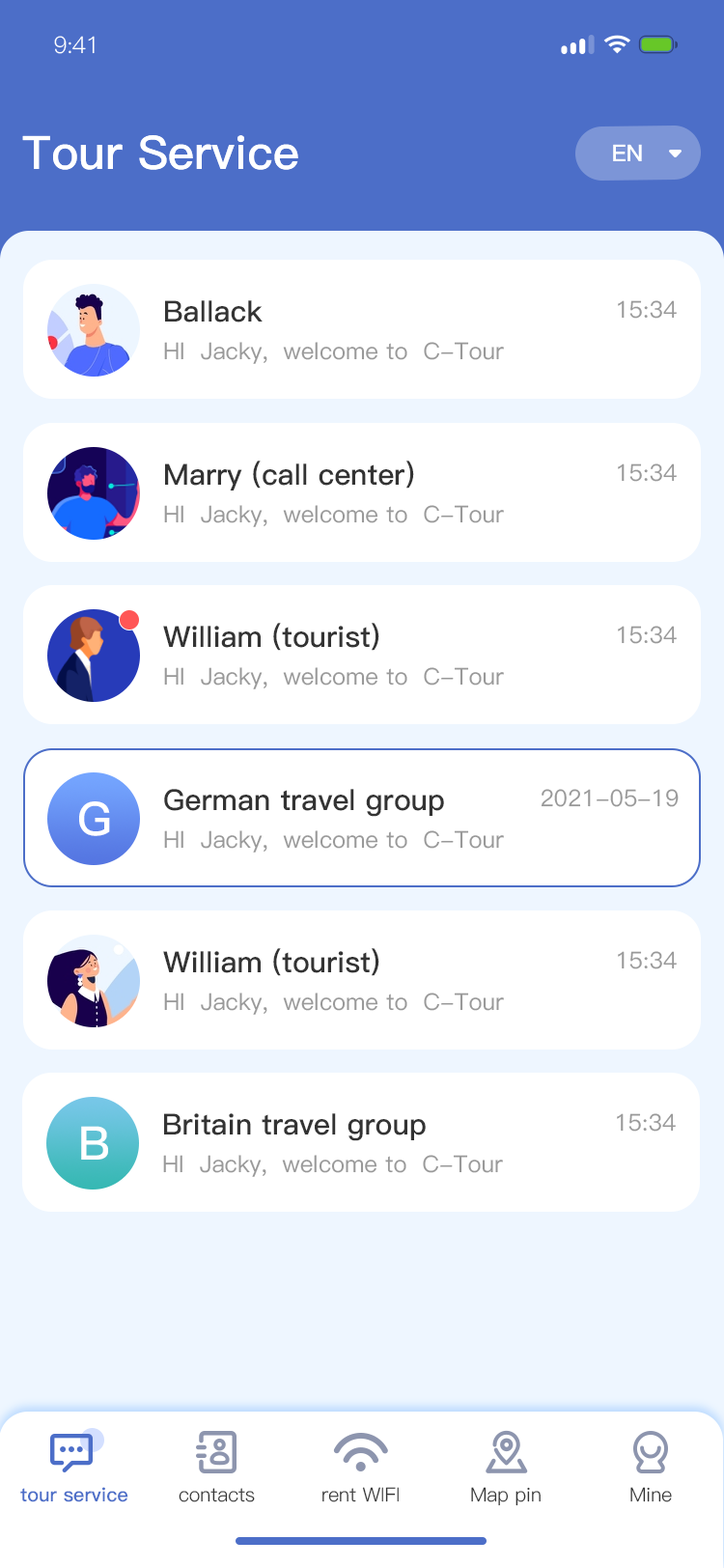
<style>
.page{position:relative;width:724px;height:1568px;background:#ffffff}
.page>*{position:absolute;margin:0}
.t1{font:23.2px "PingFang-SC-Regular";letter-spacing:-0.025em;color:#ffffff}
.t2{font:46.3px "PingFang-SC-Bold";color:#ffffff}
.t3{font:46.3px "PingFang-SC-Bold";color:#ffffff;text-transform:uppercase}
.t4{font:23.2px "PingFang-SC-Bold";color:#ffffff}
.t5{font:29px "PingFang-SC-Bold";color:#333333}
.t6{font:23.2px "PingFang-SC-Medium";color:#999999}
.t7{font:19.3px "PingFang-SC-Bold";color:#4c6ec8}
.t8{font:19.3px "PingFang-SC-Regular";color:#333333}
</style>
<div class="page">
<p class="t1" style="left:54px;top:36px;width:41px;height:18px">9:41</p>
<p class="t2" style="left:22px;top:135px;width:276px;height:35px"><span class="t3">t</span>our<span class="t3"> s</span>ervice</p>
<p class="t4" style="left:613px;top:144px;width:29px;height:17px">EN</p>
<p class="t5" style="left:165px;top:300px;width:98px;height:22px">Ballack</p>
<p class="t6" style="left:618px;top:300px;width:59px;height:19px">15:34</p>
<p class="t6" style="left:164px;top:342px;width:340px;height:22px">HI  Jacky,  welcome to  C-Tour</p>
<p class="t5" style="left:165px;top:461px;width:249px;height:29px">Marry (call center)</p>
<p class="t6" style="left:618px;top:463px;width:59px;height:19px">15:34</p>
<p class="t6" style="left:164px;top:505px;width:340px;height:22px">HI  Jacky,  welcome to  C-Tour</p>
<p class="t5" style="left:163px;top:623px;width:216px;height:28px">William (tourist)</p>
<p class="t6" style="left:618px;top:626px;width:59px;height:18px">15:34</p>
<p class="t6" style="left:164px;top:667px;width:340px;height:22px">HI  Jacky,  welcome to  C-Tour</p>
<p class="t5" style="left:164px;top:789px;width:280px;height:28px">German travel group</p>
<p class="t6" style="left:541px;top:789px;width:138px;height:18px">2021-05-19</p>
<p class="t2" style="left:79px;top:801px;width:31px;height:35px">G</p>
<p class="t6" style="left:164px;top:830px;width:340px;height:23px">HI  Jacky,  welcome to  C-Tour</p>
<p class="t5" style="left:163px;top:948px;width:216px;height:28px">William (tourist)</p>
<p class="t6" style="left:618px;top:951px;width:59px;height:18px">15:34</p>
<p class="t6" style="left:164px;top:993px;width:340px;height:22px">HI  Jacky,  welcome to  C-Tour</p>
<p class="t5" style="left:164px;top:1113px;width:262px;height:28px">Britain travel group</p>
<p class="t6" style="left:617px;top:1113px;width:59px;height:19px">15:34</p>
<p class="t2" style="left:81px;top:1126px;width:27px;height:34px">B</p>
<p class="t6" style="left:163px;top:1155px;width:340px;height:22px">HI  Jacky,  welcome to  C-Tour</p>
<p class="t7" style="left:20px;top:1487px;width:108px;height:15px">tour service</p>
<p class="t8" style="left:179px;top:1488px;width:76px;height:14px">contacts</p>
<p class="t8" style="left:322px;top:1487px;width:77px;height:15px">rent WIFI</p>
<p class="t8" style="left:471px;top:1487px;width:70px;height:19px">Map pin</p>
<p class="t8" style="left:630px;top:1487px;width:42px;height:15px">Mine</p>
</div>
